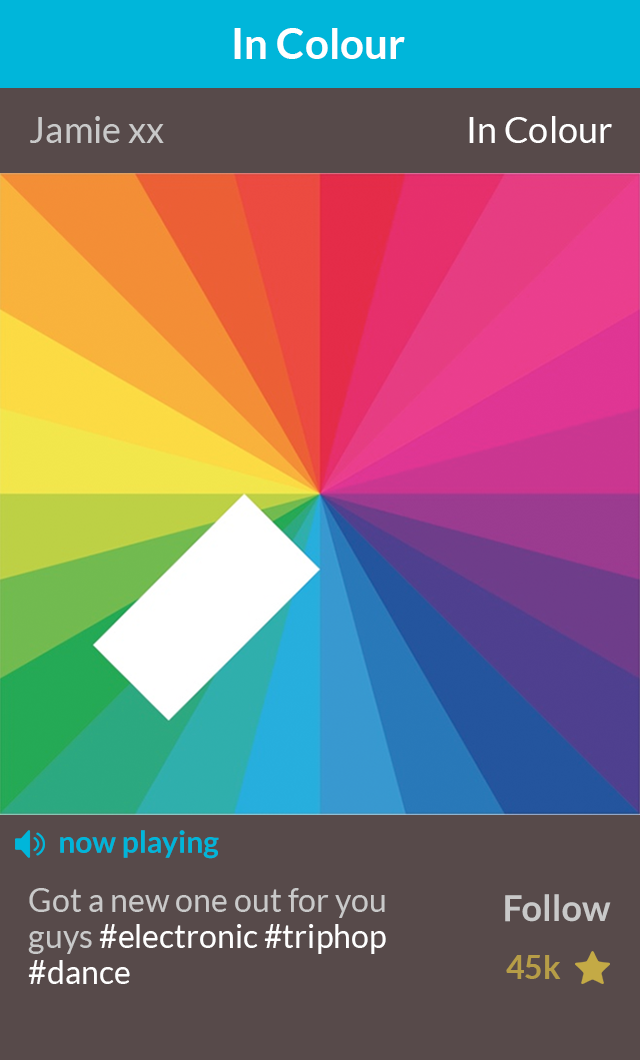
<style>
.page{position:relative;width:640px;height:1060px;background:#574a4a}
.page>*{position:absolute;margin:0}
.t1{font:42px "Lato-Bold";color:#ffffff}
.t2{font:36px "Lato-Regular";color:#c9c9c9}
.t3{font:36px "Lato-Regular";color:#ffffff}
.t4{font:30px "Lato-Bold";color:#00b6da}
.t5{font:32px/36px "Lato-Regular";color:#c9c9c9}
.t6{font:32px/36px "Lato-Regular";color:#fefefe}
.t7{font:36px "Lato-Bold";color:#c9c9c9}
.t8{font:32px "Lato-Bold";color:#b69d47}
</style>
<div class="page">
<p class="t1" style="left:234px;top:28px;width:171px;height:31px">In Colour</p>
<p class="t2" style="left:30px;top:116px;width:134px;height:27px">Jamie xx</p>
<p class="t3" style="left:469px;top:116px;width:143px;height:27px">In Colour</p>
<p class="t4" style="left:60px;top:830px;width:159px;height:29px">now playing</p>
<p class="t5" style="left:28px;top:888px;width:358px;height:96px">Got a new one out for you<br>guys <span class="t6">#electronic #triphop<br>#dance</span></p>
<p class="t7" style="left:505px;top:894px;width:106px;height:28px">Follow</p>
<p class="t8" style="left:506px;top:955px;width:55px;height:24px">45k</p>
</div>
